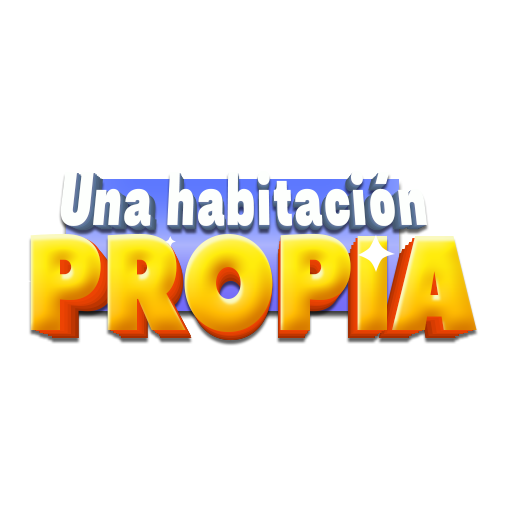
<style>
.page{position:relative;width:512px;height:512px;background:#ffffff}
.page>*{position:absolute;margin:0}
.t1{font:70.4px "AsketCondensed-ExtraBold";letter-spacing:0.025em;color:#fdfffd;scale:0.77 1}
.t2{font:69.7px "AsketCondensed-ExtraBold";letter-spacing:0.025em;color:#fdfffd;scale:0.77 1}
.t3{font:69px "AsketCondensed-ExtraBold";letter-spacing:0.025em;color:#fdfffd;scale:0.77 1}
.t4{font:68.3px "AsketCondensed-ExtraBold";letter-spacing:0.025em;color:#fdfffd;scale:0.77 1}
.t5{font:135px "PeaceSans";letter-spacing:-0.025em;scale:0.83 1}
.t6{font:132.3px "PeaceSans";letter-spacing:-0.025em;scale:0.83 1}
.t7{font:129.7px "PeaceSans";letter-spacing:-0.025em;scale:0.83 1}
.t8{font:127.1px "PeaceSans";letter-spacing:-0.025em;scale:0.83 1}
.t9{font:124.5px "PeaceSans";letter-spacing:-0.025em;scale:0.83 1}
.t10{font:122px "PeaceSans";letter-spacing:-0.025em;scale:0.83 1}
</style>
<div class="page">
<p class="t1" style="left:60px;top:170px;width:368px;height:56px">Una habitación</p>
<p class="t1" style="left:60px;top:170px;width:368px;height:56px">Una habitación</p>
<p class="t2" style="left:62px;top:172px;width:364px;height:55px">Una habitación</p>
<p class="t2" style="left:62px;top:172px;width:364px;height:55px">Una habitación</p>
<p class="t3" style="left:64px;top:173px;width:360px;height:55px">Una habitación</p>
<p class="t3" style="left:64px;top:173px;width:360px;height:55px">Una habitación</p>
<p class="t4" style="left:66px;top:175px;width:356px;height:54px">Una habitación</p>
<p class="t4" style="left:66px;top:175px;width:356px;height:54px">Una habitación</p>
<p class="t5" style="left:30px;top:233px;width:447px;height:99px">PROPIA</p>
<p class="t5" style="left:30px;top:233px;width:447px;height:99px">PROPIA</p>
<p class="t6" style="left:35px;top:235px;width:438px;height:99px">PROPIA</p>
<p class="t6" style="left:35px;top:235px;width:438px;height:99px">PROPIA</p>
<p class="t7" style="left:39px;top:239px;width:430px;height:96px">PROPIA</p>
<p class="t7" style="left:39px;top:239px;width:430px;height:96px">PROPIA</p>
<p class="t8" style="left:43px;top:242px;width:421px;height:95px">PROPIA</p>
<p class="t8" style="left:43px;top:242px;width:421px;height:95px">PROPIA</p>
<p class="t9" style="left:48px;top:247px;width:411px;height:91px">PROPIA</p>
<p class="t9" style="left:48px;top:247px;width:411px;height:91px">PROPIA</p>
<p class="t10" style="left:52px;top:250px;width:404px;height:91px">PROPIA</p>
<p class="t10" style="left:52px;top:250px;width:404px;height:91px">PROPIA</p>
</div>
